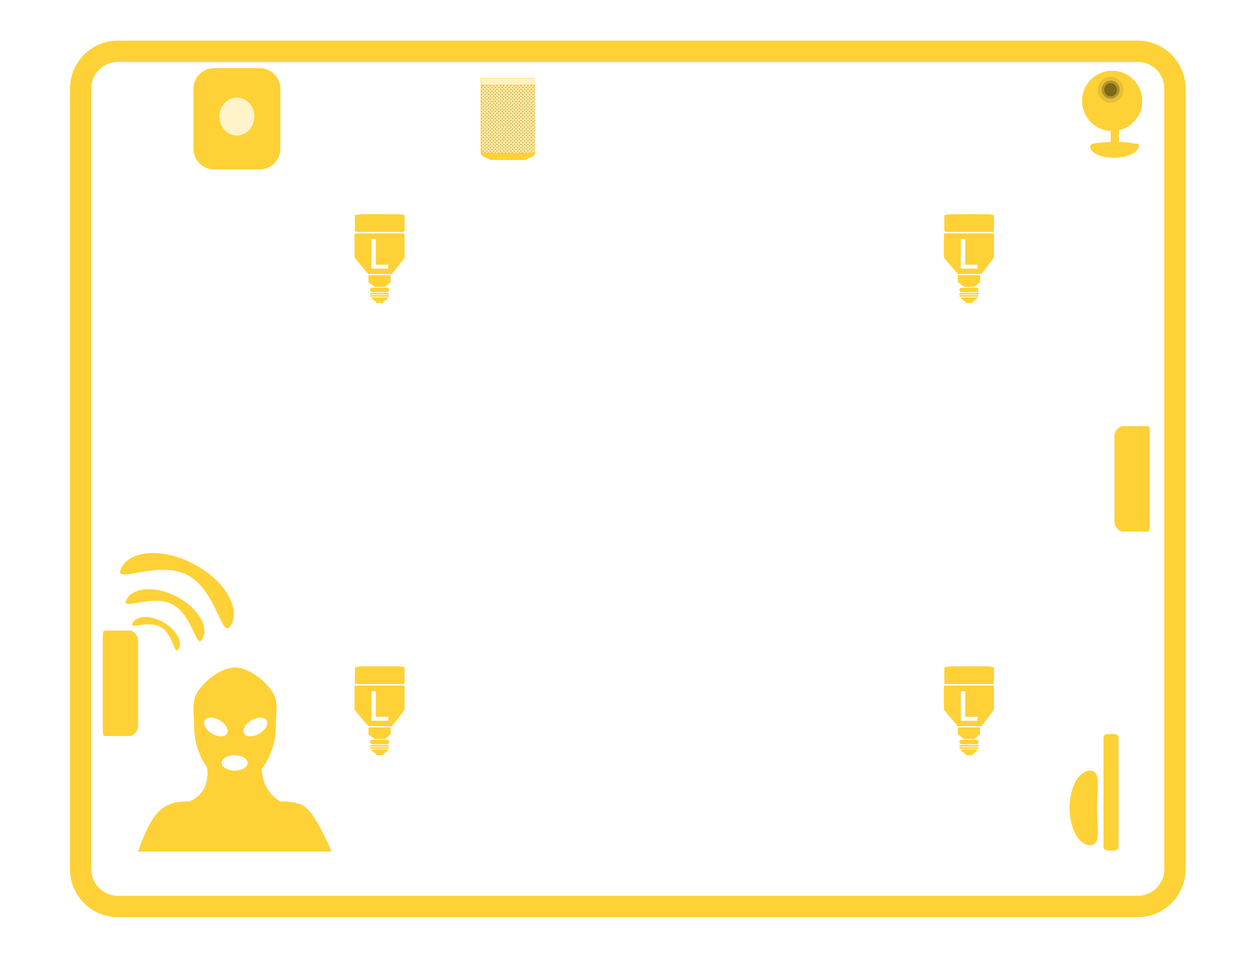
<style>
.page{position:relative;width:1242px;height:960px;background:#ffffff}
.page>*{position:absolute;margin:0}
.t1{font:40.2px "ArialMT";color:#ffffff;font-weight:bold;scale:0.88 1}
</style>
<div class="page">
<p class="t1" style="left:371px;top:239px;width:17px;height:30px">L</p>
<p class="t1" style="left:961px;top:239px;width:17px;height:30px">L</p>
<p class="t1" style="left:371px;top:691px;width:17px;height:30px">L</p>
<p class="t1" style="left:961px;top:691px;width:17px;height:30px">L</p>
</div>
